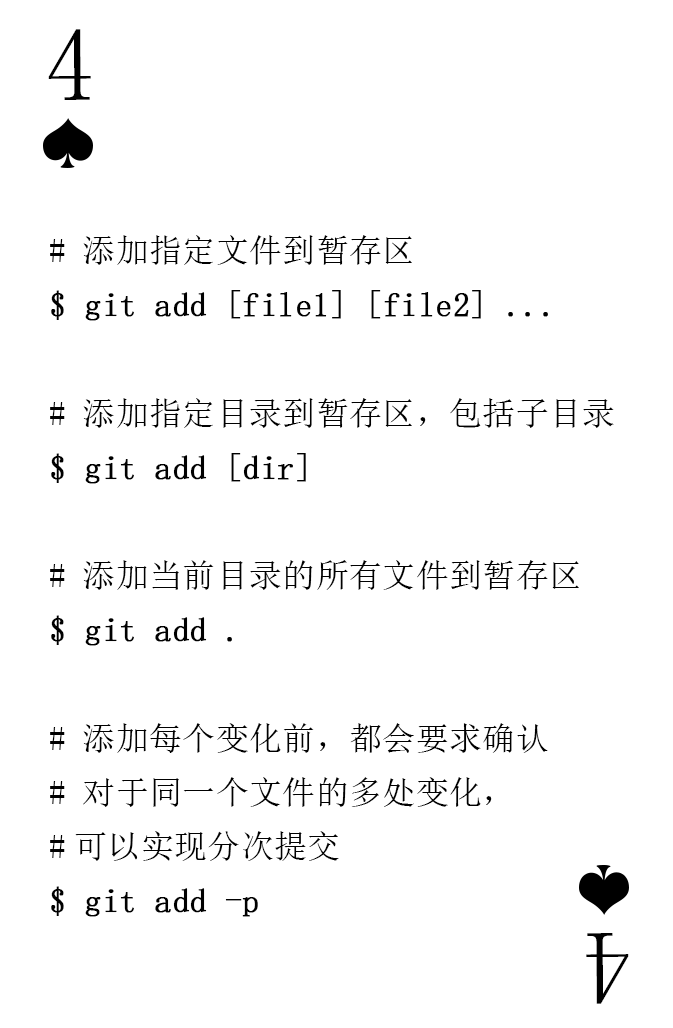
<style>
.page{position:relative;width:673px;height:1028px;background:#ffffff}
.page>*{position:absolute;margin:0}
.t1{font:104.2px "SimSun-ExtB";color:#010101;scale:0.93 1}
.t2{font:33.3px/54.2px "SimSun";color:#000000}
.t3{font:33.3px/54.2px "SimSun";color:#000000;font-weight:bold}
</style>
<div class="page">
<p class="t1" style="left:48px;top:29px;width:43px;height:71px">4</p>
<p class="t2" style="left:50px;top:235px;width:564px;height:682px"># 添加指定文件到暂存区<br><span class="t3">$ git add [file1] [file2] ...<br><br></span># 添加指定目录到暂存区，包括子目录<br><span class="t3">$ git add [dir]<br></span><br># 添加当前目录的所有文件到暂存区<br><span class="t3">$ git add .<br></span><br># 添加每个变化前，都会要求确认<br># 对于同一个文件的多处变化，<br>#可以实现分次提交<br><span class="t3">$ git add -p</span></p>
<p class="t1" style="left:586px;top:933px;width:43px;height:71px;rotate:180deg">4</p>
</div>
